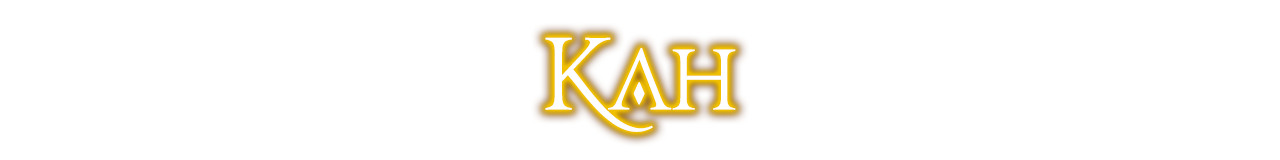
<style>
.page{position:relative;width:1280px;height:160px;background:#ffffff}
.page>*{position:absolute;margin:0}
.t1{font:77.6px "JupiterProRus";color:#ffffff}
.t2{font:92.9px "JupiterProRus";color:#ffffff}
</style>
<div class="page">
<p class="t1" style="left:545px;top:37px;width:191px;height:95px"><span class="t2">K</span>Aн</p>
</div>
